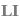
<style>
.page{position:relative;width:20px;height:20px;background:#ffffff}
.page>*{position:absolute;margin:0}
.t1{font:16px "Georgia-Bold";color:#777777}
</style>
<div class="page">
<p class="t1" style="left:1px;top:5px;width:18px;height:11px">LI</p>
</div>
